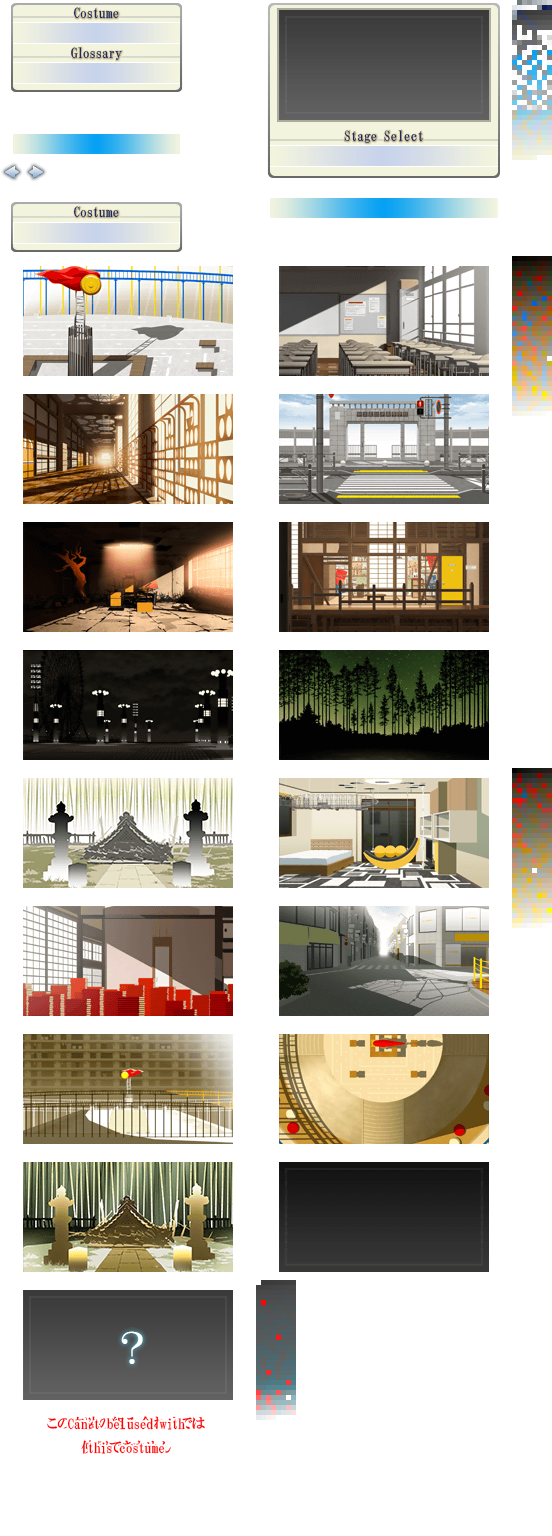
<style>
.page{position:relative;width:552px;height:1536px;background:#ffffff}
.page>*{position:absolute;margin:0}
.t1{font:14px/40px "HGMinchoB";letter-spacing:-0.025em;color:#1c295b}
.t2{font:14px "HGMinchoB";letter-spacing:-0.025em;color:#1c295b}
.t3{font:14px/24px "HGMinchoB";letter-spacing:-0.025em;color:#ff0202}
.t4{font:14px/24px "HGMinchoB";letter-spacing:-0.1em;color:#ff0202}
</style>
<div class="page">
<p class="t1" style="left:71px;top:7px;width:51px;height:53px;text-align:center">Costume<br>Glossary</p>
<p class="t2" style="left:344px;top:130px;width:79px;height:13px">Stage Select</p>
<p class="t2" style="left:73px;top:206px;width:46px;height:12px">Costume</p>
<p class="t3" style="left:67px;top:1417px;width:118px;height:37px;text-align:center">Can<span class="t4">’</span>t be used with<br>this costume</p>
</div>
